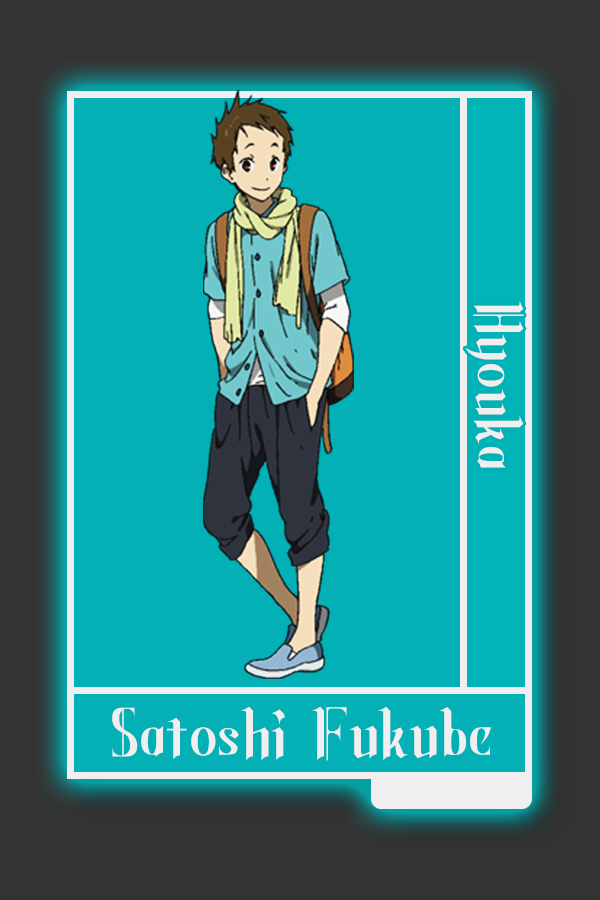
<style>
.page{position:relative;width:600px;height:900px;background:#02b0b6}
.page>*{position:absolute;margin:0}
.t1{font:70.1px "Hangyaku";color:#f0eeef}
.t2{font:75px "Hangyaku";color:#f0eeef}
</style>
<div class="page">
<p class="t1" style="left:465px;top:301px;width:59px;height:167px;rotate:90deg">Hyouka</p>
<p class="t2" style="left:112px;top:706px;width:379px;height:55px">Satoshi Fukube</p>
</div>
